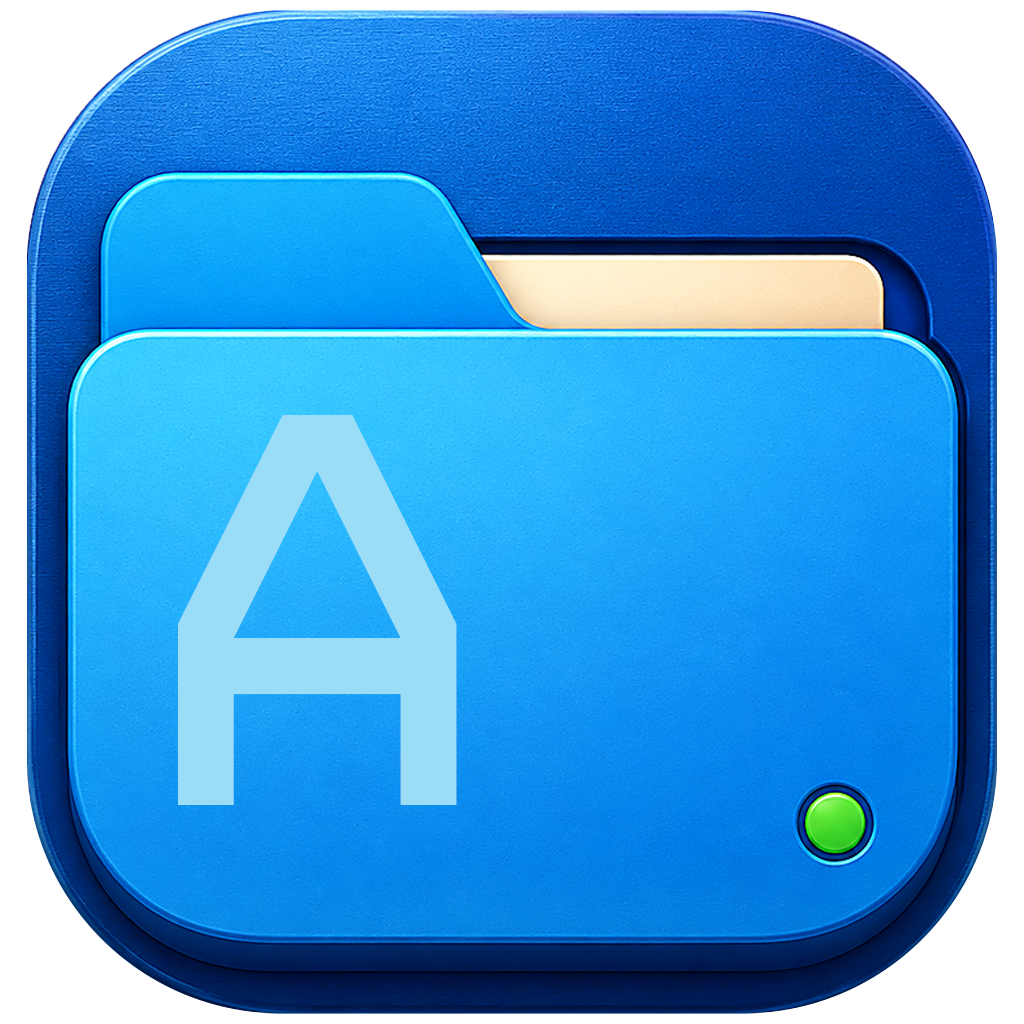
<style>
.page{position:relative;width:1024px;height:1024px}
.page>*{position:absolute;margin:0}
.t1{font:668.4px "ProFontWindows";color:#9bdcf6;text-transform:uppercase}
</style>
<div class="page">
<p class="t1" style="left:178px;top:415px;width:279px;height:390px">A</p>
</div>
